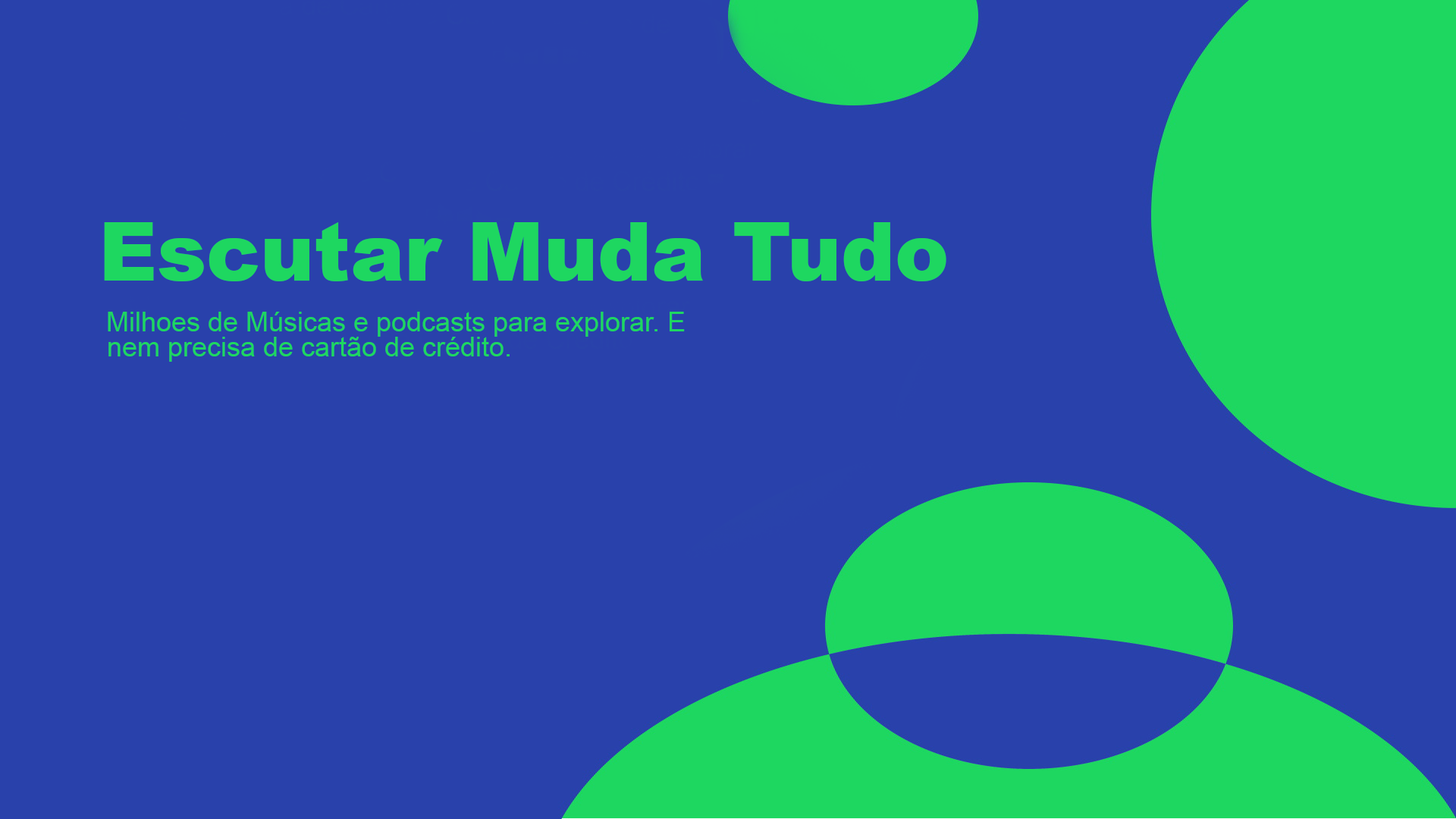
<style>
.page{position:relative;width:1456px;height:819px;background:#2941ab}
.page>*{position:absolute;margin:0}
.t1{font:80.9px "Arial-Black";color:#1ed760}
.t2{font:27.3px "ArialMT";color:#1ed760}
</style>
<div class="page">
<p class="t1" style="left:104px;top:222px;width:842px;height:59px">Escutar Muda Tudo</p>
<p class="t2" style="left:108px;top:312px;width:577px;height:25px">Milhoes de Músicas e podcasts para explorar. E</p>
<p class="t2" style="left:108px;top:337px;width:402px;height:25px">nem precisa de cartão de crédito.</p>
</div>
